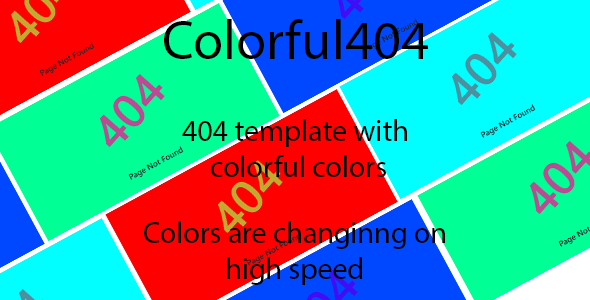
<style>
.page{position:relative;width:590px;height:300px;background:#00ff95}
.page>*{position:absolute;margin:0}
.t1{font:41.1px "MyriadPro-Regular";color:#000000}
.t2{font:22.4px "MyriadPro-Regular";color:#000000}
</style>
<div class="page">
<p class="t1" style="left:164px;top:19px;width:264px;height:40px">Colorful404</p>
<p class="t2" style="left:182px;top:119px;width:225px;height:58px;text-align:center">404 template with <br>colorful colors</p>
<p class="t2" style="left:144px;top:221px;width:301px;height:64px;text-align:center">Colors are changinng on<br>high speed</p>
</div>
